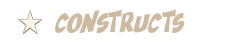
<style>
.page{position:relative;width:250px;height:45px;background:#ffffff}
.page>*{position:absolute;margin:0}
.t1{font:30px "HoustonComicsPersonalUse";color:#cdb99d}
</style>
<div class="page">
<p class="t1" style="left:55px;top:9px;width:130px;height:24px">CONSTRUCTS</p>
</div>
